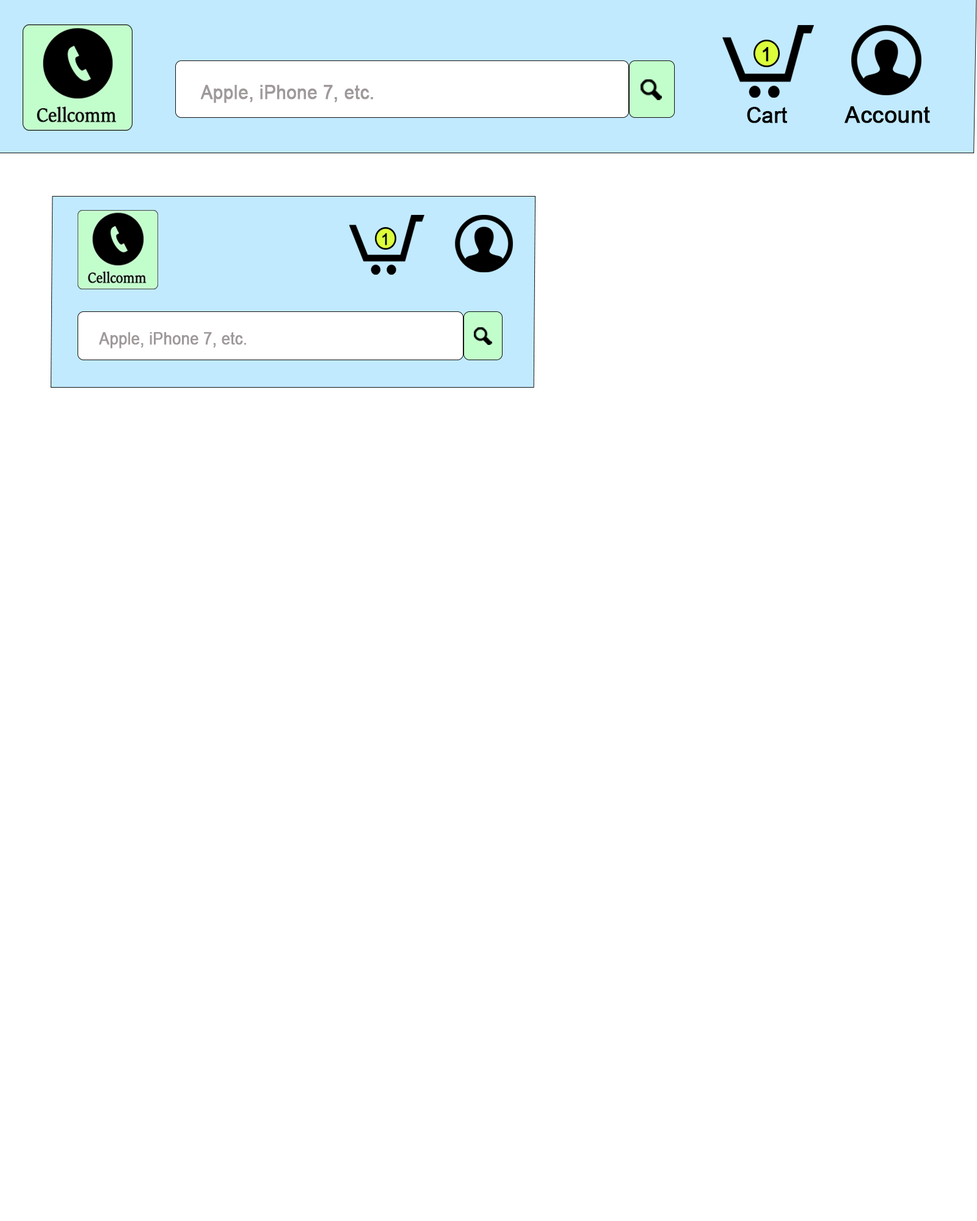
<style>
.page{position:relative;width:977px;height:1221px;background:#ffffff}
.page>*{position:absolute;margin:0}
.t1{font:19.4px "ArialMT";color:#000000;font-weight:bold;scale:0.94 1}
.t2{font:19.8px "ArialMT";color:#9f9999;font-weight:bold;scale:0.9 1}
.t3{font:21.9px "ArialMT";color:#000000;font-weight:bold;scale:0.95 1}
.t4{font:22.4px "ArialMT";color:#000000;font-weight:bold}
.t5{font:15.9px "ArialMT";color:#000000;font-weight:bold;scale:0.95 1}
.t6{font:16.9px "ArialMT";color:#9f9999;font-weight:bold;scale:0.9 1}
</style>
<div class="page">
<p class="t1" style="left:762px;top:47px;width:7px;height:15px">1</p>
<p class="t2" style="left:200px;top:85px;width:173px;height:18px">Apple, iPhone 7, etc.</p>
<p class="t3" style="left:747px;top:107px;width:40px;height:16px">Cart</p>
<p class="t4" style="left:844px;top:106px;width:86px;height:17px">Account</p>
<p class="t5" style="left:382px;top:233px;width:5px;height:12px">1</p>
<p class="t6" style="left:99px;top:332px;width:147px;height:17px">Apple, iPhone 7, etc.</p>
</div>
